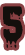
<style>
.page{position:relative;width:25px;height:55px;background:#130f0c}
.page>*{position:absolute;margin:0}
.t1{font:45.8px "CSNPWDTNFI";color:#130f0c}
</style>
<div class="page">
<p class="t1" style="left:3px;top:6px;width:20px;height:42px">5</p>
</div>
